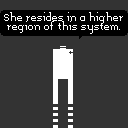
<style>
.page{position:relative;width:128px;height:128px;background:#333333}
.page>*{position:absolute;margin:0}
.t1{font:8px "Memoria";color:#ffffff}
</style>
<div class="page">
<p class="t1" style="left:4px;top:12px;width:119px;height:22px;text-align:center">She resides in a higher<br>region of this system.</p>
</div>
